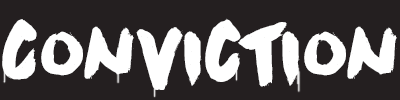
<style>
.page{position:relative;width:400px;height:100px;background:#241f20}
.page>*{position:absolute;margin:0}
.t1{font:77.2px "DKDownwardFall";color:#ffffff}
</style>
<div class="page">
<p class="t1" style="left:2px;top:18px;width:395px;height:72px">Conviction</p>
</div>
